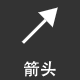
<style>
.page{position:relative;width:80px;height:80px;background:#333333}
.page>*{position:absolute;margin:0}
.t1{font:16.7px "AdobeHeitiStd-Regular";letter-spacing:-0.02em;color:#ffffff}
</style>
<div class="page">
<p class="t1" style="left:24px;top:61px;width:32px;height:16px">箭头</p>
</div>
